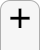
<style>
.page{position:relative;width:40px;height:50px;background:#f6f6f6}
.page>*{position:absolute;margin:0}
.t1{font:36.1px "GrotesqueMTStd";color:#000000}
</style>
<div class="page">
<p class="t1" style="left:10px;top:8px;width:20px;height:20px">+</p>
</div>
